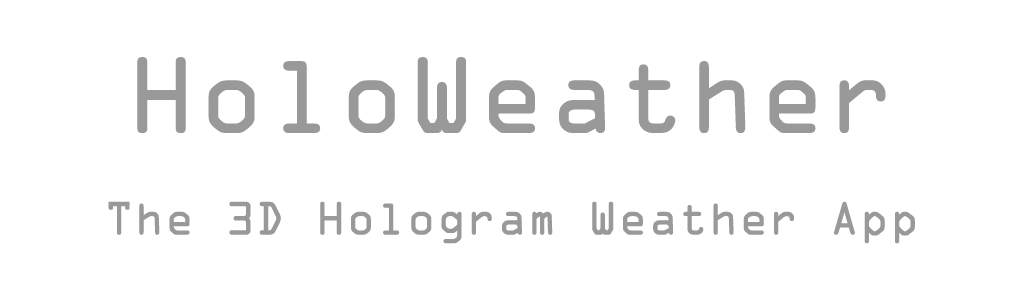
<style>
.page{position:relative;width:1024px;height:300px;background:#ffffff}
.page>*{position:absolute;margin:0}
.t1{font:72px/70px "OCRAStd";color:#999999}
.t2{font:167px/70px "MyriadPro-Regular";color:#999999}
.t3{font:167px/70px "OCRAStd";color:#999999}
</style>
<div class="page">
<p class="t1" style="left:108px;top:57px;width:807px;height:187px;text-align:center"><span class="t2"><br></span><span class="t3">HoloWeather<br></span>The 3D Hologram Weather App</p>
</div>
